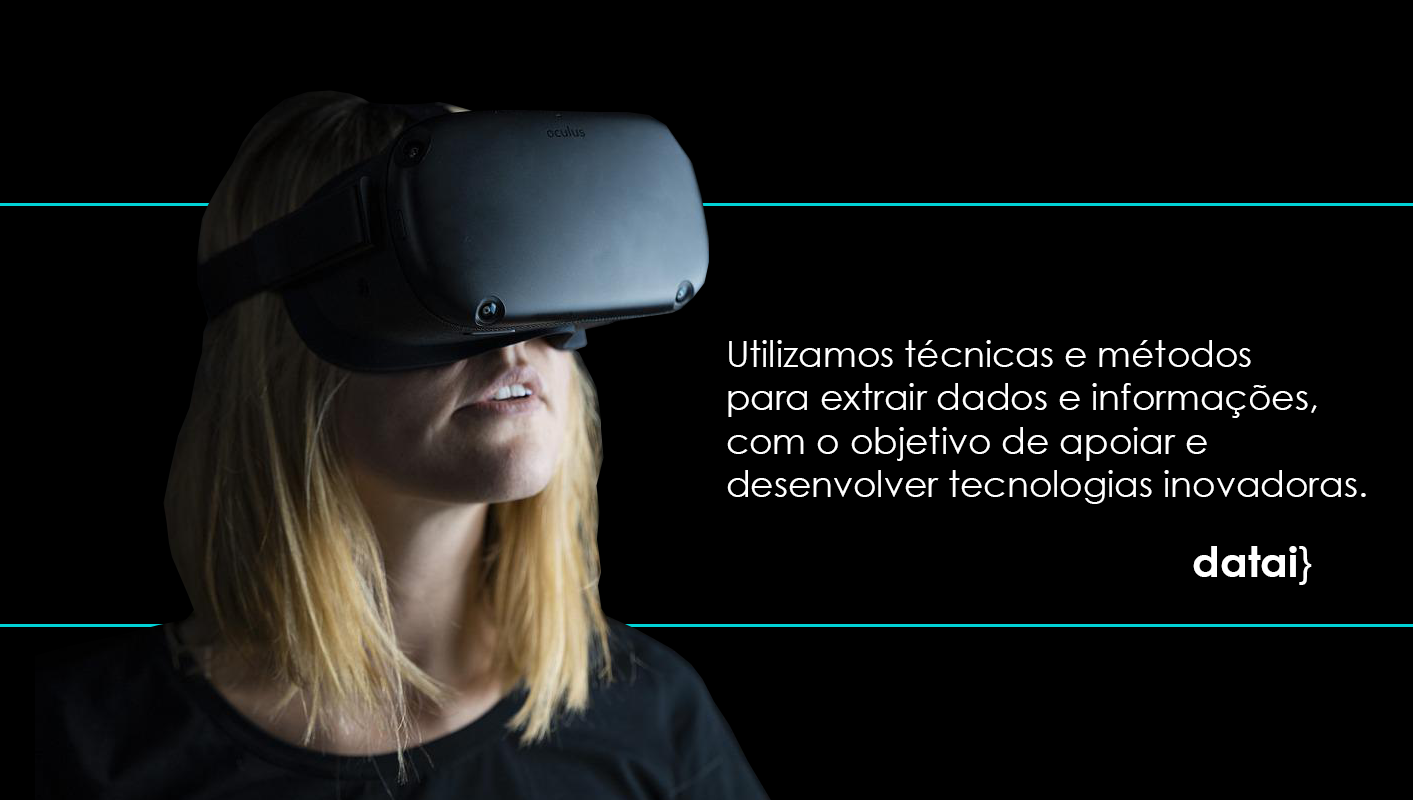
<style>
.page{position:relative;width:1413px;height:800px;background:#000000}
.page>*{position:absolute;margin:0}
.t1{font:36px "CenturyGothic";color:#ffffff}
.t2{font:42px "CenturyGothic-Bold";color:#ffffff}
.t3{font:42px "CenturyGothic";color:#ffffff}
</style>
<div class="page">
<p class="t1" style="left:727px;top:340px;width:639px;height:164px">Utilizamos técnicas e métodos<br>para extrair dados e informações,<br>com o objetivo de apoiar e<br>desenvolver tecnologias inovadoras.</p>
<p class="t2" style="left:1193px;top:546px;width:119px;height:39px">datai<span class="t3">}</span></p>
</div>
